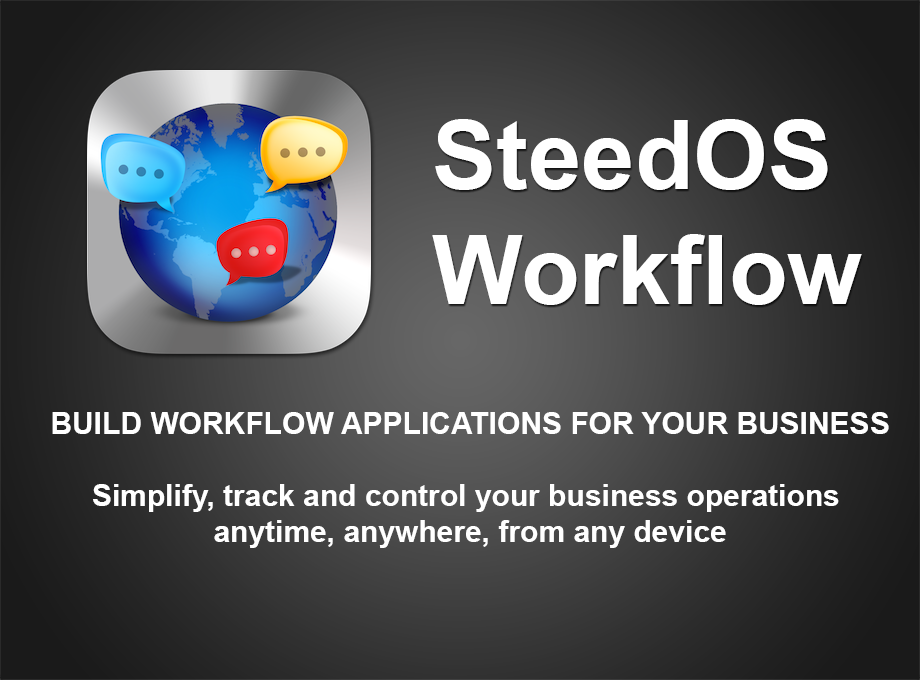
<style>
.page{position:relative;width:920px;height:680px}
.page>*{position:absolute;margin:0}
.t1{font:96px "Arial-BoldMT";color:#ffffff}
.t2{font:30px "Arial-BoldMT";color:#ffffff}
</style>
<div class="page">
<p class="t1" style="left:432px;top:119px;width:430px;height:186px">SteedOS<br>Workflow</p>
<p class="t2" style="left:52px;top:412px;width:837px;height:136px;text-align:center">BUILD WORKFLOW APPLICATIONS FOR YOUR BUSINESS<br><br>Simplify, track and control your business operations <br>anytime, anywhere, from any device</p>
</div>
